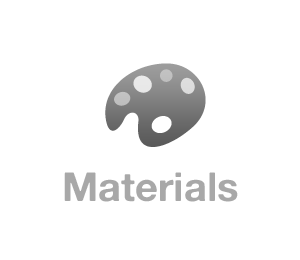
<style>
.page{position:relative;width:300px;height:260px;background:#ffffff}
.page>*{position:absolute;margin:0}
.t1{font:40px "AlteHaasGrotesk_Bold";color:#a8a8a8}
</style>
<div class="page">
<p class="t1" style="left:64px;top:172px;width:174px;height:30px">Materials</p>
</div>
